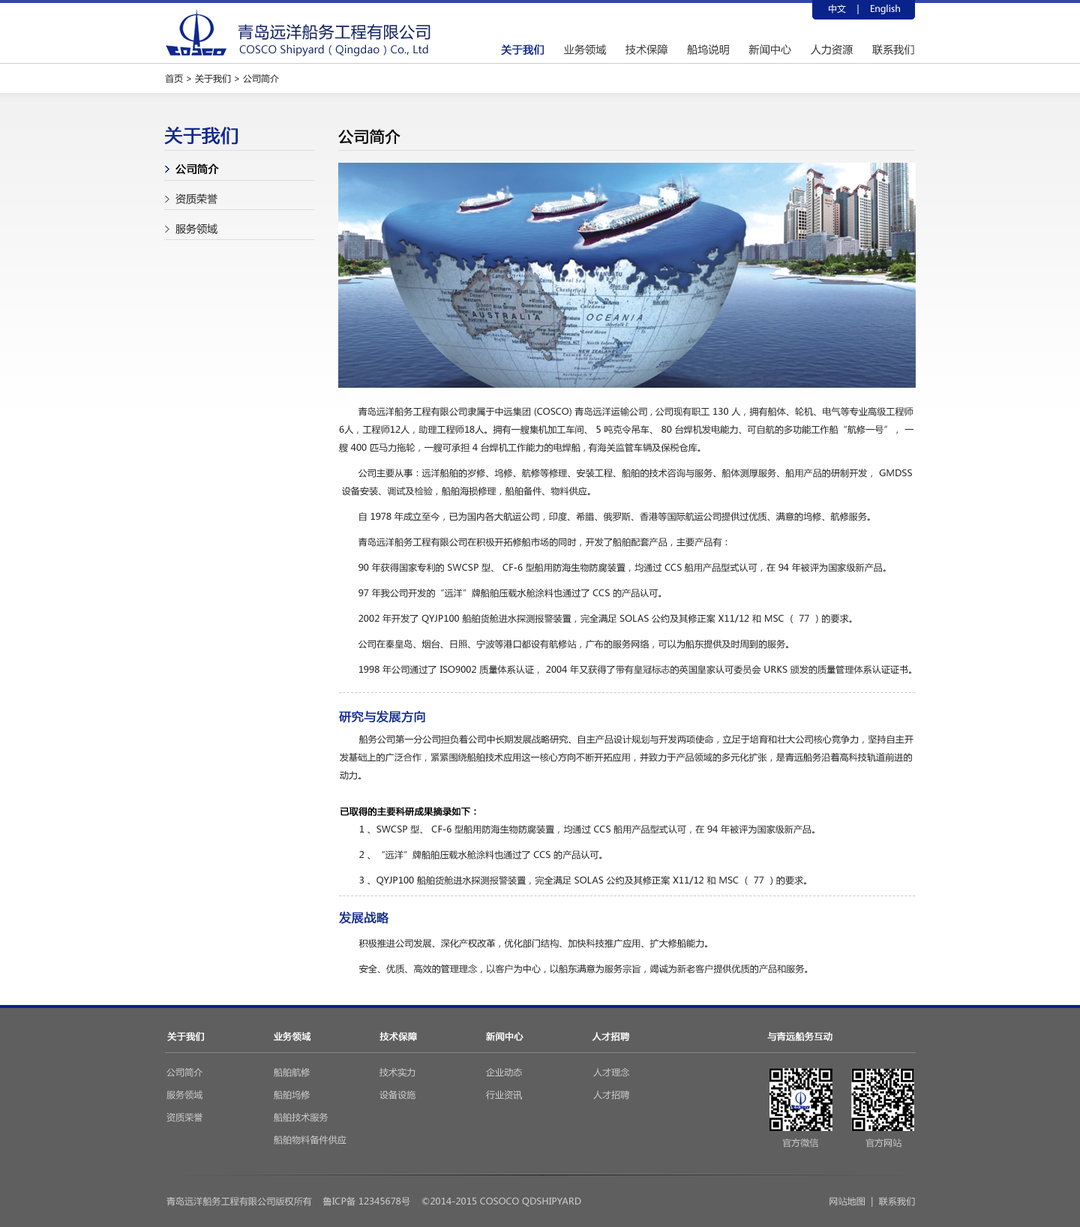
<style>
.page{position:relative;width:1080px;height:1227px;background:#ffffff}
.page>*{position:absolute;margin:0}
.t1{font:9px "MicrosoftYaHei";color:#ffffff}
.t2{font:15.8px "MicrosoftYaHei";letter-spacing:0.025em;color:#112262;text-transform:uppercase}
.t3{font:10.5px "MicrosoftYaHei";letter-spacing:0.01em;color:#112262}
.t4{font:10.5px "MicrosoftYaHei";letter-spacing:0.01em;color:#333333;text-transform:uppercase}
.t5{font:10.5px "MicrosoftYaHei";letter-spacing:0.01em;color:#10298e;text-transform:uppercase;font-weight:bold}
.t6{font:9px "MicrosoftYaHei";color:#272727}
.t7{font:18px "MicrosoftYaHei";letter-spacing:0.01em;color:#10298e;text-transform:uppercase;font-weight:bold}
.t8{font:15px "MicrosoftYaHei";letter-spacing:0.01em;color:#000000;text-transform:uppercase;font-weight:bold}
.t9{font:10.5px/30px "MicrosoftYaHei";color:#272727}
.t10{font:10.5px/30px "MicrosoftYaHei";color:#000000;font-weight:bold}
.t11{font:9px/18px "MicrosoftYaHei";letter-spacing:0.01em;color:#272727;text-transform:uppercase}
.t12{font:9px "MicrosoftYaHei";letter-spacing:0.01em;color:#cccccc;text-transform:uppercase}
.t13{font:12px "MicrosoftYaHei";letter-spacing:0.01em;color:#10298e;text-transform:uppercase;font-weight:bold}
.t14{font:9px/18px "MicrosoftYaHei";letter-spacing:0.01em;color:#000000;text-transform:uppercase;font-weight:bold}
.t15{font:9px "MicrosoftYaHei";letter-spacing:0.01em;color:#ffffff;text-transform:uppercase;font-weight:bold}
.t16{font:9px/22.5px "MicrosoftYaHei";letter-spacing:0.01em;color:#cccccc;text-transform:uppercase}
</style>
<div class="page">
<p class="t1" style="left:829px;top:4px;width:71px;height:10px">中文    |    English</p>
<p class="t2" style="left:238px;top:24px;width:192px;height:16px">青岛远洋船务工程有限公司</p>
<p class="t3" style="left:239px;top:44px;width:189px;height:12px">COSCO Shipyard（Qingdao）Co., Ltd</p>
<p class="t4" style="left:501px;top:44px;width:413px;height:12px"><span class="t5">关于我们</span>      业务领域      技术保障      船坞说明      新闻中心      人力资源      联系我们</p>
<p class="t6" style="left:165px;top:74px;width:114px;height:9px">首页 &gt; 关于我们 &gt; 公司简介</p>
<p class="t7" style="left:164px;top:127px;width:74px;height:18px">关于我们</p>
<p class="t8" style="left:338px;top:129px;width:62px;height:16px">公司简介</p>
<p class="t9" style="left:176px;top:164px;width:43px;height:70px"><span class="t10">公司简介<br></span>资质荣誉<br>服务领域</p>
<p class="t11" style="left:339px;top:406px;width:575px;height:268px">青岛远洋船务工程有限公司隶属于中远集团 (cosco) 青岛远洋运输公司 , 公司现有职工 130 人，拥有船体、轮机、电气等专业高级工程师<br>6人，工程师12人，助理工程师18人。拥有一艘集机加工车间、 5 吨克令吊车、 80 台焊机发电能力、可自航的多功能工作船“航修一号”， 一<br>艘 400 匹马力拖轮，一艘可承担 4 台焊机工作能力的电焊船 , 有海关监管车辆及保税仓库。<br><br>       公司主要从事：远洋船舶的岁修、坞修、航修等修理、安装工程、船舶的技术咨询与服务、船体测厚服务、船用产品的研制开发， GMDSS<br> 设备安装、调试及检验，船舶海损修理，船舶备件、物料供应。  <br><br>       自 1978 年成立至今，已为国内各大航运公司，印度、希腊、俄罗斯、香港等国际航运公司提供过优质、满意的坞修、航修服务。<br><br>       青岛远洋船务工程有限公司在积极开拓修船市场的同时，开发了船舶配套产品，主要产品有：<br><br>       90 年获得国家专利的 SWCSP 型、 CF-6 型船用防海生物防腐装置，均通过 CCS 船用产品型式认可，在 94 年被评为国家级新产品。<br><br>       97 年我公司开发的“远洋”牌船舶压载水舱涂料也通过了 CCS 的产品认可。<br><br>       2002 年开发了 QYJP100 船舶货舱进水探测报警装置，完全满足 SOLAS 公约及其修正案 X11/12 和 MSC （ 77 ）的要求。<br><br>       公司在秦皇岛、烟台、日照、宁波等港口都设有航修站，广布的服务网络，可以为船东提供及时周到的服务。<br><br>       1998 年公司通过了 ISO9002 质量体系认证， 2004 年又获得了带有皇冠标志的英国皇家认可委员会 URKS 颁发的质量管理体系认证证书。</p>
<p class="t12" style="left:339px;top:692px;width:577px;height:1px">-------------------------------------------------------------------------------------------------------------------------------------------------</p>
<p class="t13" style="left:339px;top:710px;width:86px;height:13px">研究与发展方向</p>
<p class="t11" style="left:340px;top:734px;width:574px;height:152px">船务公司第一分公司担负着公司中长期发展战略研究、自主产品设计规划与开发两项使命，立足于培育和壮大公司核心竞争力，坚持自主开<br>发基础上的广泛合作，紧紧围绕船舶技术应用这一核心方向不断开拓应用，并致力于产品领域的多元化扩张，是青远船务沿着高科技轨道前进的<br>动力。<br><br><span class="t14">已取得的主要科研成果摘录如下： <br></span>       1 、SWCSP 型、 CF-6 型船用防海生物防腐装置，均通过 CCS 船用产品型式认可，在 94 年被评为国家级新产品。<br><br>       2 、“远洋”牌船舶压载水舱涂料也通过了 CCS 的产品认可。<br><br>       3 、QYJP100 船舶货舱进水探测报警装置，完全满足 SOLAS 公约及其修正案 X11/12 和 MSC （ 77 ）的要求。</p>
<p class="t12" style="left:339px;top:896px;width:577px;height:0px">-------------------------------------------------------------------------------------------------------------------------------------------------</p>
<p class="t13" style="left:339px;top:911px;width:49px;height:13px">发展战略</p>
<p class="t11" style="left:359px;top:938px;width:449px;height:36px">积极推进公司发展、深化产权改革，优化部门结构、加快科技推广应用、扩大修船能力。<br><br>       安全、优质、高效的管理理念，以客户为中心，以船东满意为服务宗旨，竭诚为新老客户提供优质的产品和服务。</p>
<p class="t15" style="left:167px;top:1031px;width:665px;height:10px">关于我们                       业务领域                       技术保障                       新闻中心                       人才招聘                                              与青远船务互动</p>
<p class="t16" style="left:166px;top:1068px;width:36px;height:54px">公司简介<br>服务领域<br>资质荣誉</p>
<p class="t16" style="left:274px;top:1068px;width:72px;height:76px">船舶航修<br>船舶坞修<br>船舶技术服务<br>船舶物料备件供应</p>
<p class="t16" style="left:380px;top:1068px;width:36px;height:32px">技术实力<br>设备设施</p>
<p class="t16" style="left:486px;top:1068px;width:37px;height:32px">企业动态<br>行业资讯</p>
<p class="t16" style="left:593px;top:1068px;width:36px;height:32px">人才理念<br>人才招聘</p>
<p class="t12" style="left:782px;top:1138px;width:120px;height:10px">官方微信                 官方网站</p>
<p class="t12" style="left:166px;top:1196px;width:749px;height:11px">青岛远洋船务工程有限公司版权所有    鲁ICP备 12345678号    ©2014-2015 COSOCO QDSHIPYARD                                                                                          网站地图  |  联系我们</p>
</div>
